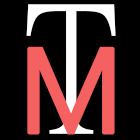
<style>
.page{position:relative;width:140px;height:140px;background:#000000}
.page>*{position:absolute;margin:0}
.t1{font:180px "MingLiU-ExtB";color:#ffffff}
.t2{font:121.5px "YuGothicUI-Regular";color:#f56060;font-weight:bold}
</style>
<div class="page">
<p class="t1" style="left:26px;top:4px;width:90px;height:130px">T</p>
<p class="t2" style="left:27px;top:46px;width:88px;height:89px">M</p>
</div>
